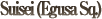
<style>
.page{position:relative;width:102px;height:19px;background:#ffffff}
.page>*{position:absolute;margin:0}
.t1{font:18px "RyuminPro-ExBold";letter-spacing:-0.13em;color:#4a3f32;font-weight:bold;scale:0.85 1}
</style>
<div class="page">
<p class="t1" style="left:0px;top:1px;width:102px;height:18px">Suisei (Egusa Sq.)</p>
</div>
